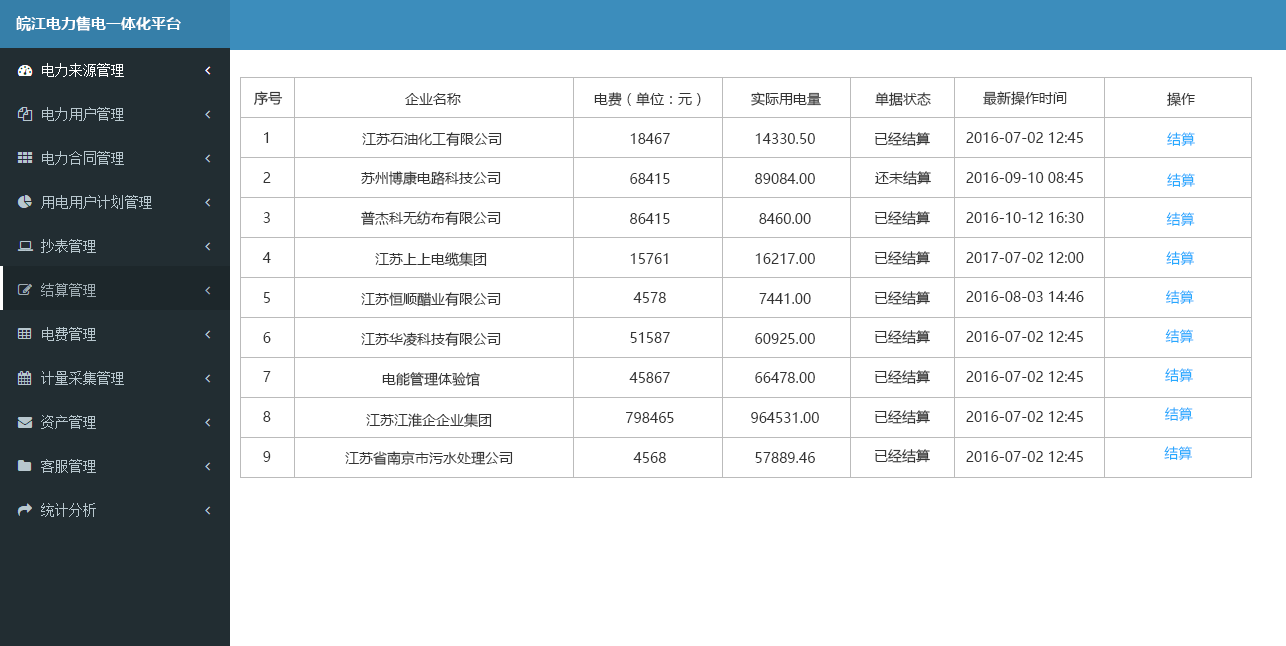
<style>
.page{position:relative;width:1286px;height:646px;background:#ffffff}
.page>*{position:absolute;margin:0}
.t1{font:15px "MicrosoftYaHei-Bold";color:#ffffff}
.t2{font:14px "MicrosoftYaHei";color:#333333}
.t3{font:14px "MicrosoftYaHeiLight"}
.t4{font:14px "MicrosoftYaHeiLight";color:#00a2ff}
</style>
<div class="page">
<p class="t1" style="left:16px;top:16px;width:165px;height:15px">皖江电力售电一体化平台</p>
<p class="t2" style="left:254px;top:91px;width:29px;height:14px">序号</p>
<p class="t2" style="left:405px;top:93px;width:56px;height:12px">企业名称</p>
<p class="t2" style="left:594px;top:92px;width:107px;height:15px">电费（单位：元）</p>
<p class="t2" style="left:751px;top:92px;width:70px;height:14px">实际用电量</p>
<p class="t2" style="left:875px;top:92px;width:56px;height:14px">单据状态</p>
<p class="t2" style="left:983px;top:91px;width:84px;height:15px">最新操作时间</p>
<p class="t2" style="left:1167px;top:92px;width:28px;height:15px">操作</p>
<p class="t2" style="left:264px;top:132px;width:5px;height:11px">1</p>
<p class="t2" style="left:362px;top:132px;width:140px;height:15px">江苏石油化工有限公司</p>
<p class="t2" style="left:630px;top:133px;width:40px;height:11px">18467</p>
<p class="t2" style="left:755px;top:133px;width:60px;height:11px">14330.50</p>
<p class="t2" style="left:875px;top:132px;width:55px;height:14px">已经结算</p>
<p class="t2" style="left:966px;top:132px;width:117px;height:11px">2016-07-02 12:45</p>
<p class="t3" style="left:1167px;top:132px;width:28px;height:14px">结算</p>
<p class="t2" style="left:263px;top:172px;width:8px;height:11px">2</p>
<p class="t2" style="left:361px;top:171px;width:140px;height:15px">苏州博康电路科技公司</p>
<p class="t2" style="left:630px;top:173px;width:40px;height:11px">68415</p>
<p class="t2" style="left:755px;top:173px;width:60px;height:11px">89084.00</p>
<p class="t2" style="left:875px;top:171px;width:56px;height:14px">还未结算</p>
<p class="t2" style="left:966px;top:172px;width:117px;height:11px">2016-09-10 08:45</p>
<p class="t3" style="left:1167px;top:173px;width:28px;height:14px">结算</p>
<p class="t2" style="left:263px;top:212px;width:7px;height:11px">3</p>
<p class="t2" style="left:361px;top:211px;width:140px;height:15px">普杰科无纺布有限公司</p>
<p class="t2" style="left:630px;top:213px;width:40px;height:11px">86415</p>
<p class="t2" style="left:759px;top:213px;width:52px;height:11px">8460.00</p>
<p class="t2" style="left:875px;top:211px;width:55px;height:14px">已经结算</p>
<p class="t2" style="left:966px;top:212px;width:118px;height:11px">2016-10-12 16:30</p>
<p class="t3" style="left:1166px;top:212px;width:29px;height:14px">结算</p>
<p class="t2" style="left:262px;top:252px;width:9px;height:11px">4</p>
<p class="t2" style="left:375px;top:252px;width:112px;height:15px">江苏上上电缆集团</p>
<p class="t2" style="left:630px;top:253px;width:38px;height:11px">15761</p>
<p class="t2" style="left:755px;top:253px;width:60px;height:11px">16217.00</p>
<p class="t2" style="left:875px;top:251px;width:55px;height:14px">已经结算</p>
<p class="t2" style="left:966px;top:252px;width:118px;height:11px">2017-07-02 12:00</p>
<p class="t4" style="left:1166px;top:251px;width:28px;height:14px">结算</p>
<p class="t2" style="left:263px;top:292px;width:7px;height:11px">5</p>
<p class="t2" style="left:361px;top:292px;width:140px;height:15px">江苏恒顺醋业有限公司</p>
<p class="t2" style="left:633px;top:292px;width:33px;height:11px">4578</p>
<p class="t2" style="left:759px;top:293px;width:52px;height:11px">7441.00</p>
<p class="t2" style="left:875px;top:291px;width:55px;height:14px">已经结算</p>
<p class="t2" style="left:966px;top:291px;width:118px;height:11px">2016-08-03 14:46</p>
<p class="t3" style="left:1166px;top:290px;width:28px;height:14px">结算</p>
<p class="t3" style="left:1165px;top:329px;width:29px;height:14px">结算</p>
<p class="t2" style="left:263px;top:332px;width:8px;height:11px">6</p>
<p class="t2" style="left:361px;top:332px;width:140px;height:15px">江苏华凌科技有限公司</p>
<p class="t2" style="left:630px;top:332px;width:40px;height:11px">51587</p>
<p class="t2" style="left:755px;top:333px;width:60px;height:11px">60925.00</p>
<p class="t2" style="left:875px;top:330px;width:55px;height:14px">已经结算</p>
<p class="t2" style="left:966px;top:331px;width:117px;height:11px">2016-07-02 12:45</p>
<p class="t2" style="left:263px;top:371px;width:8px;height:11px">7</p>
<p class="t2" style="left:382px;top:372px;width:98px;height:15px">电能管理体验馆</p>
<p class="t2" style="left:629px;top:372px;width:41px;height:11px">45867</p>
<p class="t2" style="left:755px;top:372px;width:60px;height:11px">66478.00</p>
<p class="t2" style="left:875px;top:370px;width:55px;height:14px">已经结算</p>
<p class="t2" style="left:966px;top:371px;width:117px;height:11px">2016-07-02 12:45</p>
<p class="t3" style="left:1165px;top:368px;width:28px;height:14px">结算</p>
<p class="t2" style="left:263px;top:411px;width:8px;height:11px">8</p>
<p class="t2" style="left:366px;top:413px;width:126px;height:15px">江苏江淮企企业集团</p>
<p class="t2" style="left:626px;top:412px;width:48px;height:11px">798465</p>
<p class="t2" style="left:751px;top:412px;width:68px;height:11px">964531.00</p>
<p class="t2" style="left:875px;top:410px;width:55px;height:14px">已经结算</p>
<p class="t2" style="left:966px;top:411px;width:117px;height:11px">2016-07-02 12:45</p>
<p class="t3" style="left:1165px;top:407px;width:28px;height:14px">结算</p>
<p class="t2" style="left:875px;top:449px;width:55px;height:14px">已经结算</p>
<p class="t4" style="left:1164px;top:446px;width:28px;height:14px">结算</p>
<p class="t2" style="left:263px;top:451px;width:8px;height:11px">9</p>
<p class="t2" style="left:345px;top:451px;width:168px;height:14px">江苏省南京市污水处理公司</p>
<p class="t2" style="left:633px;top:452px;width:33px;height:11px">4568</p>
<p class="t2" style="left:755px;top:452px;width:60px;height:11px">57889.46</p>
<p class="t2" style="left:966px;top:451px;width:117px;height:11px">2016-07-02 12:45</p>
</div>
